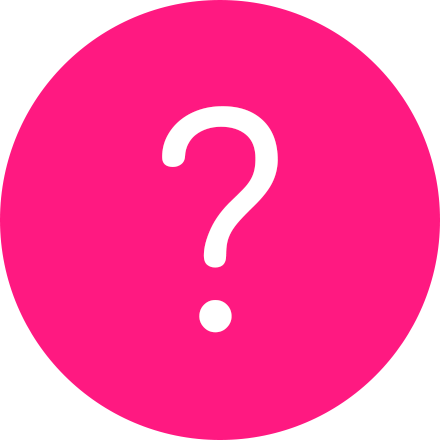
<style>
.page{position:relative;width:440px;height:440px;background:#ff1981}
.page>*{position:absolute;margin:0}
.t1{font:300px "STYuanti-SC-Regular";color:#ffffff}
</style>
<div class="page">
<p class="t1" style="left:162px;top:106px;width:116px;height:227px">?</p>
</div>
